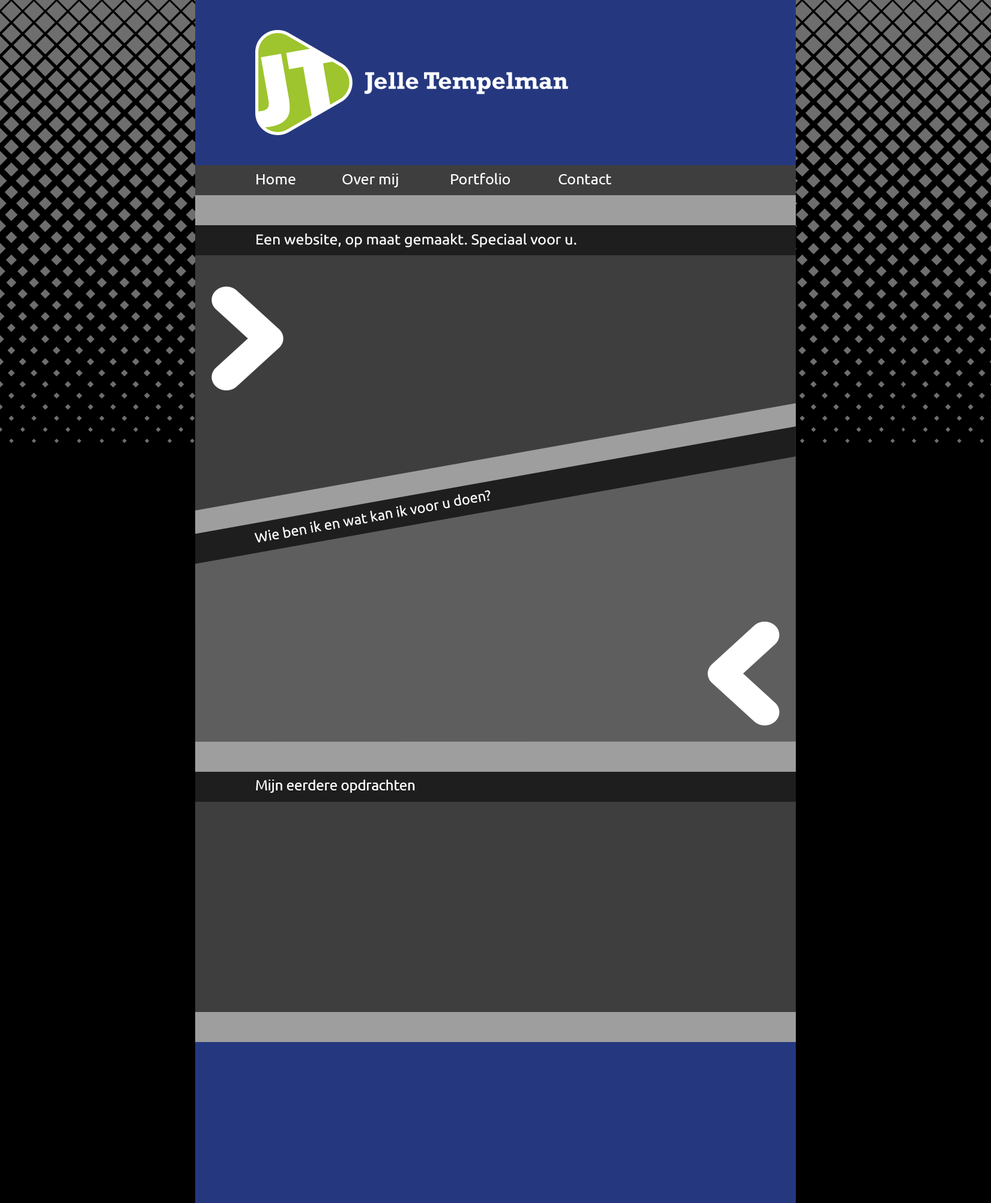
<style>
.page{position:relative;width:991px;height:1203px;background:#000000}
.page>*{position:absolute;margin:0}
.t1{font:15px "Ubuntu";color:#fefefe}
.t2{font:14.2px "Ubuntu";color:#fefefe;scale:1.05 1}
.t3{font:14.2px "Ubuntu";color:#fefefe}
</style>
<div class="page">
<p class="t1" style="left:256px;top:173px;width:355px;height:14px">Home   Over mij   Portfolio   Contact</p>
<p class="t2" style="left:256px;top:233px;width:321px;height:14px">Een website, op maat gemaakt. Speciaal voor u.</p>
<p class="t3" style="left:254px;top:490px;width:236px;height:53px;rotate:-10deg">Wie ben ik en wat kan ik voor u doen?</p>
<p class="t3" style="left:256px;top:780px;width:159px;height:13px">Mijn eerdere opdrachten</p>
</div>
